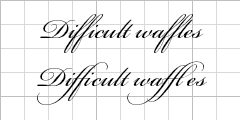
<style>
.page{position:relative;width:240px;height:120px;background:#ffffff}
.page>*{position:absolute;margin:0}
.t1{font:40px "BickhamScriptPro3";color:#000000}
</style>
<div class="page">
<p class="t1" style="left:37px;top:14px;width:170px;height:91px;text-align:center">Difficult waffles<br>Difficult waffles</p>
</div>
